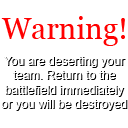
<style>
.page{position:relative;width:128px;height:128px;background:#ffffff}
.page>*{position:absolute;margin:0}
.t1{font:30px "Georgia";color:#ff0000}
.t2{font:12px "ArialMT"}
</style>
<div class="page">
<p class="t1" style="left:1px;top:16px;width:124px;height:30px">Warning!</p>
<p class="t2" style="left:2px;top:57px;width:126px;height:54px;text-align:center">You are deserting your<br>team. Return to the<br>battlefield immediately<br>or you will be destroyed</p>
</div>
